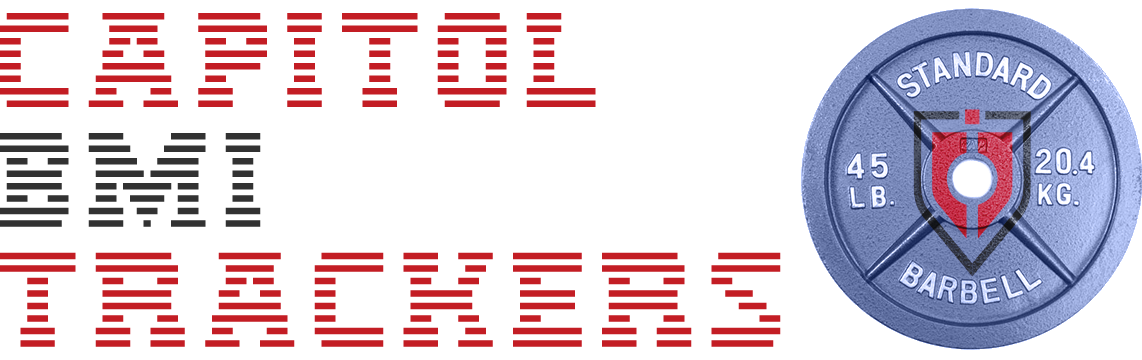
<style>
.page{position:relative;width:1142px;height:360px;background:#ffffff}
.page>*{position:absolute;margin:0}
.t1{font:99.9px "IBM-Logo";color:#c31d24;scale:1.1 1}
.t2{font:99.9px "IBM-Logo";color:#323232;scale:1.1 1}
</style>
<div class="page">
<p class="t1" style="left:0px;top:13px;width:781px;height:334px">Capitol<br><span class="t2">BMI<br></span>Trackers</p>
</div>
